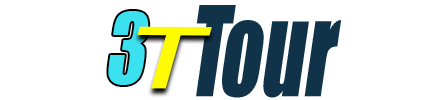
<style>
.page{position:relative;width:430px;height:100px;background:#ffffff}
.page>*{position:absolute;margin:0}
.t1{font:115.1px "Impact";letter-spacing:-0.08em;color:#11334a;font-style:italic;scale:0.7 1}
.t2{font:91px "Impact";letter-spacing:-0.08em;color:#3ce1f0;font-style:italic;scale:0.81 1}
.t3{font:86.4px "Bahnschrift";letter-spacing:-0.08em;color:#fefb03;font-style:italic;scale:1.66 1}
</style>
<div class="page">
<p class="t1" style="left:196px;top:5px;width:145px;height:93px">To u r</p>
<p class="t2" style="left:108px;top:11px;width:41px;height:74px">3</p>
<p class="t3" style="left:137px;top:26px;width:75px;height:63px">T</p>
</div>
